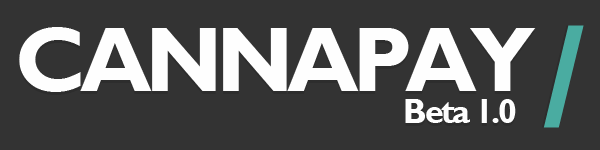
<style>
.page{position:relative;width:600px;height:150px;background:#333333}
.page>*{position:absolute;margin:0}
.t1{font:92.2px "GillSansMT-Bold";letter-spacing:-0.075em;color:#fefefe}
.t2{font:145.3px "GillSansMT-Bold";letter-spacing:-0.075em;color:#4aaca1}
.t3{font:34.2px "GillSansMT-Bold";letter-spacing:-0.075em;color:#fefefe}
</style>
<div class="page">
<p class="t1" style="left:19px;top:27px;width:517px;height:65px">CANNAPAY</p>
<p class="t2" style="left:543px;top:25px;width:41px;height:103px">/</p>
<p class="t3" style="left:405px;top:99px;width:111px;height:24px">Beta 1.0</p>
</div>
